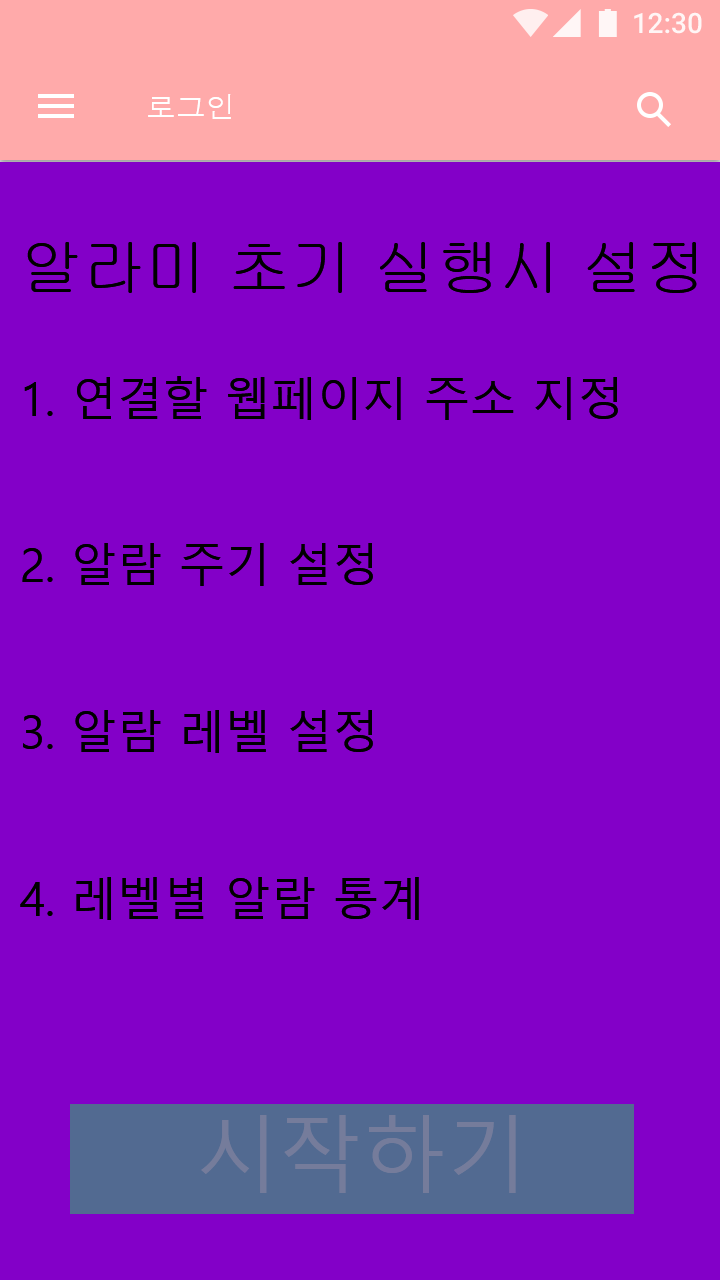
<style>
.page{position:relative;width:720px;height:1280px;background:#8300c8}
.page>*{position:absolute;margin:0}
.t1{font:30px "Dotum";color:#ffffff}
.t2{font:62.5px "Gulim";color:#000000}
.t3{font:45.8px/166.7px "MalgunGothic";color:#000000}
.t4{font:83.3px "MalgunGothic";color:#757c9b}
</style>
<div class="page">
<p class="t1" style="left:148px;top:94px;width:83px;height:25px">로그인</p>
<p class="t2" style="left:27px;top:242px;width:670px;height:51px">알라미 초기 실행시 설정</p>
<p class="t3" style="left:20px;top:376px;width:598px;height:544px">1. 연결할 웹페이지 주소 지정<br>2. 알람 주기 설정 <br>3. 알람 레벨 설정<br>4. 레벨별 알람 통계</p>
<p class="t4" style="left:201px;top:1115px;width:315px;height:78px">시작하기</p>
</div>
